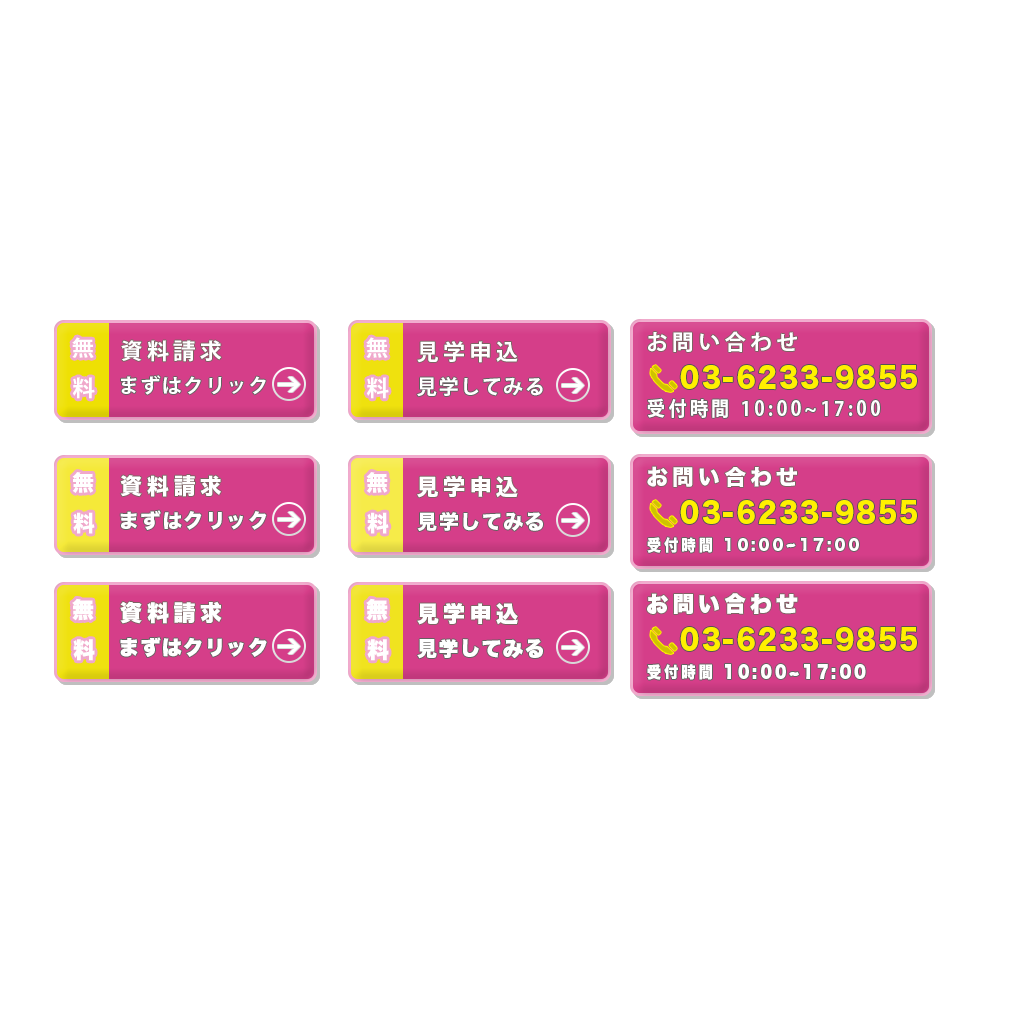
<style>
.page{position:relative;width:1024px;height:1024px;background:#ffffff}
.page>*{position:absolute;margin:0}
.t1{font:22px/40px "KozGoPr6N-Bold";letter-spacing:0.2em;color:#ffffff}
.t2{font:22px "KozGoPr6N-Bold";letter-spacing:0.2em;color:#ffffff}
.t3{font:21.6px "KozGoPr6N-Bold";letter-spacing:0.2em;color:#ffffff}
.t4{font:28px "HiraKakuStdN-W8";letter-spacing:0.08em;color:#fff000;scale:0.89 1}
.t5{font:20px "KozGoPr6N-Bold";letter-spacing:0.08em;color:#ffffff}
.t6{font:20px "KozGoPr6N-Bold";letter-spacing:0.2em;color:#ffffff;scale:0.9 1}
.t7{font:22px/40px "HiraKakuStdN-W8";letter-spacing:0.2em;color:#ffffff}
.t8{font:21.6px "HiraKakuStdN-W8";letter-spacing:0.2em;color:#ffffff}
.t9{font:22px "HiraKakuStdN-W8";letter-spacing:0.2em;color:#ffffff}
.t10{font:20px "HiraKakuStdN-W8";letter-spacing:0.08em;color:#ffffff}
.t11{font:16px "HiraKakuStdN-W8";letter-spacing:0.2em;color:#ffffff;scale:0.9 1}
.t12{font:21.6px "HiraginoSans-W9";letter-spacing:0.2em;color:#ffffff}
.t13{font:22px/40px "HiraginoSans-W9";letter-spacing:0.2em;color:#ffffff}
.t14{font:22px "HiraginoSans-W9";letter-spacing:0.2em;color:#ffffff}
.t15{font:20px "HiraginoSans-W9";letter-spacing:0.08em;color:#ffffff}
.t16{font:16px "HiraginoSans-W9";letter-spacing:0.2em;color:#ffffff;scale:0.9 1}
</style>
<div class="page">
<p class="t1" style="left:72px;top:337px;width:23px;height:62px">無<br>料</p>
<p class="t2" style="left:121px;top:340px;width:101px;height:22px">資料請求</p>
<p class="t1" style="left:366px;top:337px;width:23px;height:62px">無<br>料</p>
<p class="t2" style="left:417px;top:341px;width:101px;height:22px">見学申込</p>
<p class="t3" style="left:648px;top:331px;width:149px;height:21px">お問い合わせ</p>
<p class="t4" style="left:680px;top:365px;width:237px;height:25px">03-6233-9855</p>
<p class="t5" style="left:121px;top:375px;width:145px;height:20px">まずはクリック</p>
<p class="t5" style="left:417px;top:377px;width:126px;height:20px">見学してみる</p>
<p class="t6" style="left:647px;top:398px;width:233px;height:20px">受付時間 10:00~17:00</p>
<p class="t7" style="left:72px;top:472px;width:23px;height:62px">無<br>料</p>
<p class="t7" style="left:366px;top:472px;width:23px;height:62px">無<br>料</p>
<p class="t8" style="left:647px;top:466px;width:150px;height:21px">お問い合わせ</p>
<p class="t9" style="left:120px;top:475px;width:101px;height:22px">資料請求</p>
<p class="t9" style="left:417px;top:475px;width:101px;height:23px">見学申込</p>
<p class="t10" style="left:120px;top:510px;width:147px;height:20px">まずはクリック</p>
<p class="t4" style="left:680px;top:500px;width:237px;height:25px">03-6233-9855</p>
<p class="t10" style="left:417px;top:512px;width:126px;height:19px">見学してみる</p>
<p class="t11" style="left:647px;top:537px;width:212px;height:16px">受付時間 10:00~17:00</p>
<p class="t12" style="left:647px;top:593px;width:151px;height:21px">お問い合わせ</p>
<p class="t13" style="left:72px;top:598px;width:23px;height:63px">無<br>料</p>
<p class="t14" style="left:120px;top:601px;width:102px;height:23px">資料請求</p>
<p class="t13" style="left:366px;top:598px;width:23px;height:63px">無<br>料</p>
<p class="t14" style="left:417px;top:603px;width:101px;height:22px">見学申込</p>
<p class="t4" style="left:680px;top:627px;width:237px;height:25px">03-6233-9855</p>
<p class="t15" style="left:120px;top:637px;width:147px;height:20px">まずはクリック</p>
<p class="t15" style="left:417px;top:639px;width:126px;height:20px">見学してみる</p>
<p class="t16" style="left:647px;top:664px;width:219px;height:16px">受付時間 10:00~17:00</p>
</div>
